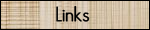
<style>
.page{position:relative;width:150px;height:30px}
.page>*{position:absolute;margin:0}
.t1{font:20px "GeosansLight";color:#000000;font-weight:bold}
</style>
<div class="page">
<p class="t1" style="left:56px;top:6px;width:34px;height:16px">Links</p>
</div>
